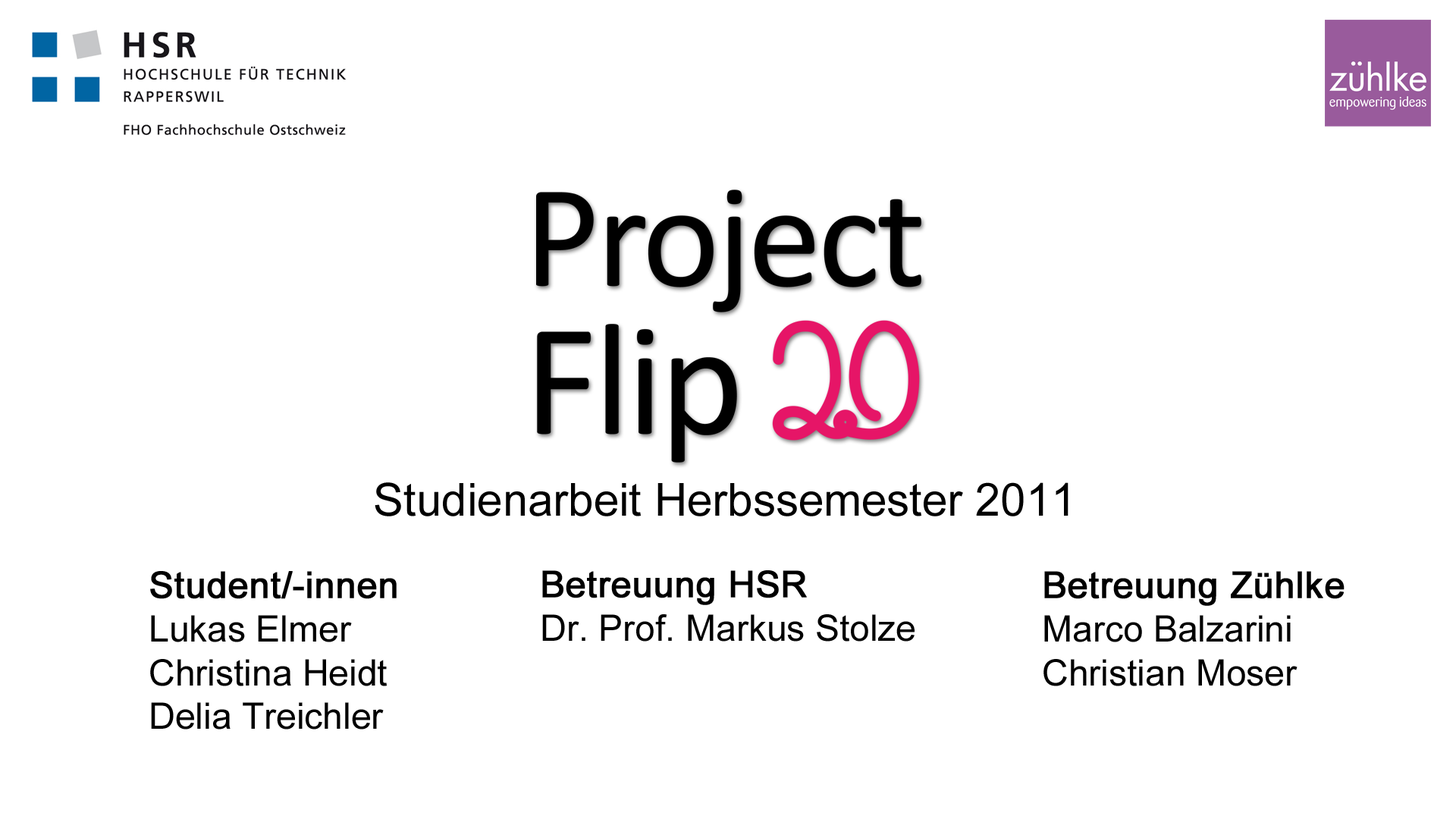
<style>
.page{position:relative;width:1456px;height:819px;background:#ffffff}
.page>*{position:absolute;margin:0}
.t1{font:45.5px "ArialMT";color:#000000}
.t2{font:36.4px "ArialMT";color:#000000}
.t3{font:36.4px "ArialMT";color:#000000;font-weight:bold}
</style>
<div class="page">
<p class="t1" style="left:375px;top:482px;width:693px;height:34px">Studienarbeit Herbssemester 2011</p>
<p class="t2" style="left:150px;top:571px;width:247px;height:159px"><span class="t3">Student/-innen<br></span>Lukas Elmer<br>Christina Heidt<br>Delia Treichler</p>
<p class="t2" style="left:542px;top:570px;width:373px;height:72px"><span class="t3">Betreuung HSR<br></span>Dr. Prof. Markus Stolze</p>
<p class="t2" style="left:1043px;top:571px;width:302px;height:115px"><span class="t3">Betreuung Zühlke<br></span>Marco Balzarini<br>Christian Moser</p>
</div>
